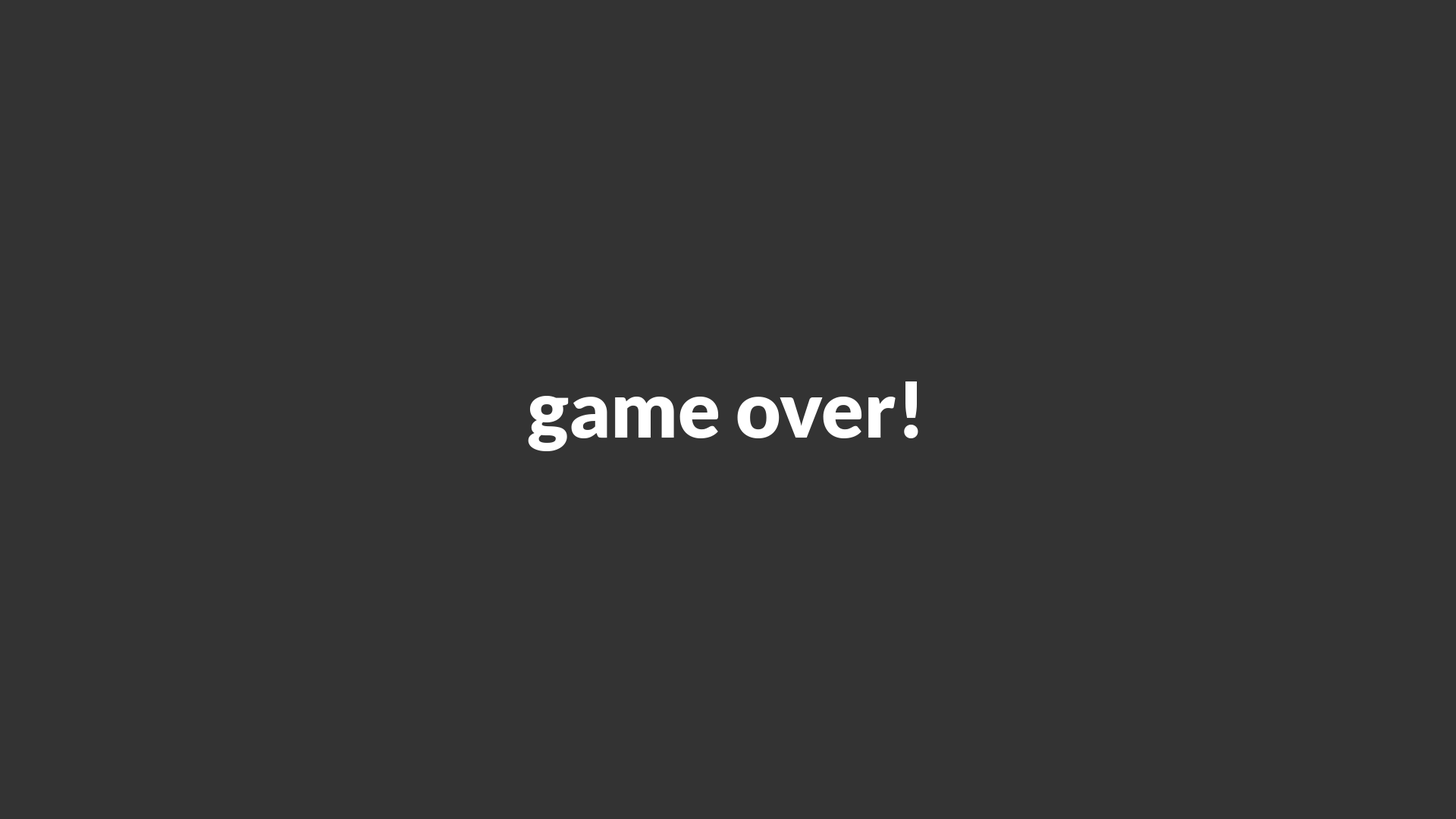
<style>
.page{position:relative;width:1456px;height:819px;background:#333333}
.page>*{position:absolute;margin:0}
.t1{font:78.2px "Lato-Black";color:#ffffff}
</style>
<div class="page">
<p class="t1" style="left:528px;top:381px;width:390px;height:70px">game over!</p>
</div>
